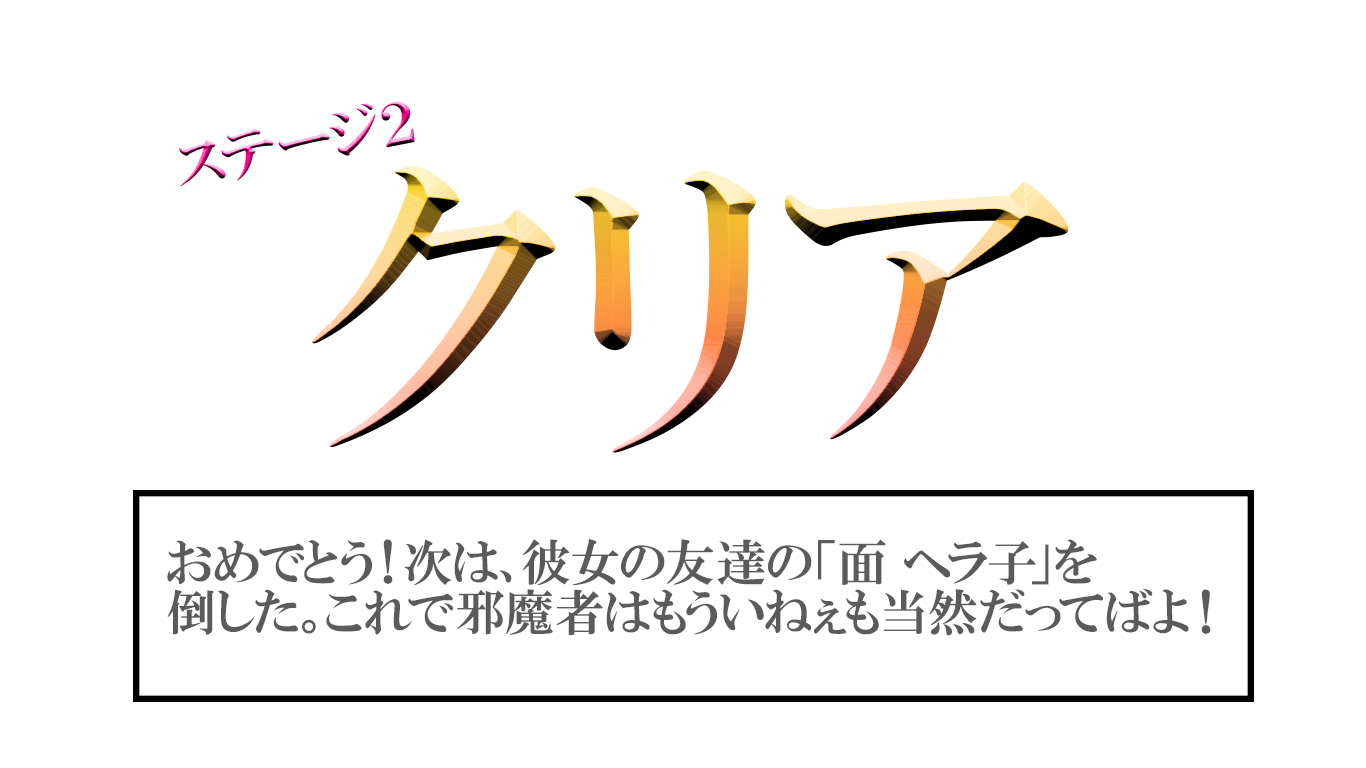
<style>
.page{position:relative;width:1366px;height:768px;background:#ffffff}
.page>*{position:absolute;margin:0}
.t1{font:58.4px "HGPMinchoE"}
.t2{font:326.3px "HGPMinchoE"}
.t3{font:50px/50px "HGPMinchoE";color:#5b5b5b}
</style>
<div class="page">
<p class="t1" style="left:179px;top:101px;width:236px;height:86px;rotate:-11deg">ステージ２</p>
<p class="t2" style="left:312px;top:166px;width:757px;height:287px">クリア</p>
<p class="t3" style="left:167px;top:539px;width:1044px;height:97px">おめでとう！次は、彼女の友達の「面 ヘラ子」を<br>倒した。これで邪魔者はもういねぇも当然だってばよ！</p>
</div>
